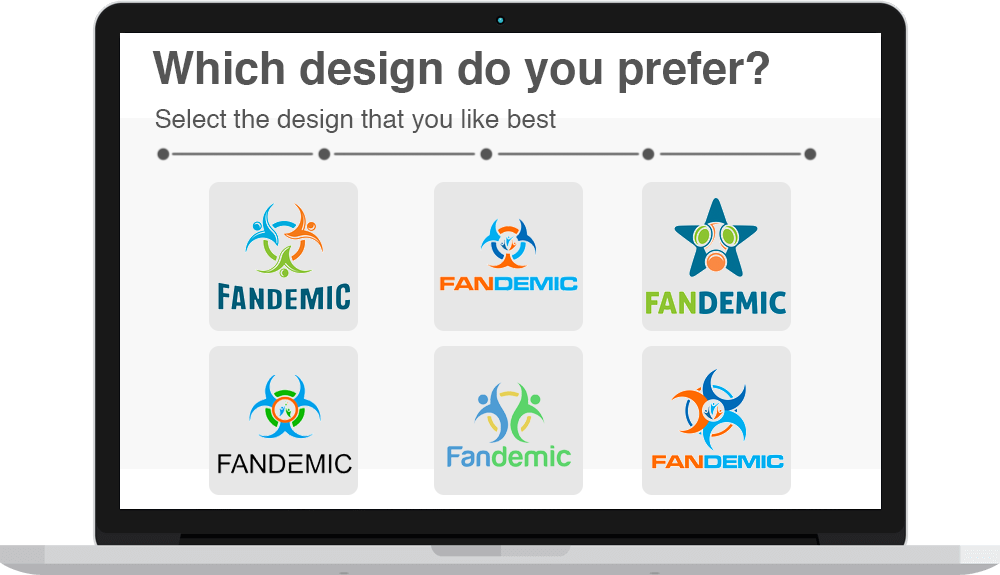
<style>
.page{position:relative;width:1000px;height:575px;background:#ffffff}
.page>*{position:absolute;margin:0}
.t1{font:45px "Helvetica-Bold";color:#555555}
.t2{font:26px "Helvetica";color:#555555}
</style>
<div class="page">
<p class="t1" style="left:152px;top:51px;width:617px;height:42px">Which design do you prefer?</p>
<p class="t2" style="left:155px;top:109px;width:401px;height:24px">Select the design that you like best</p>
</div>
